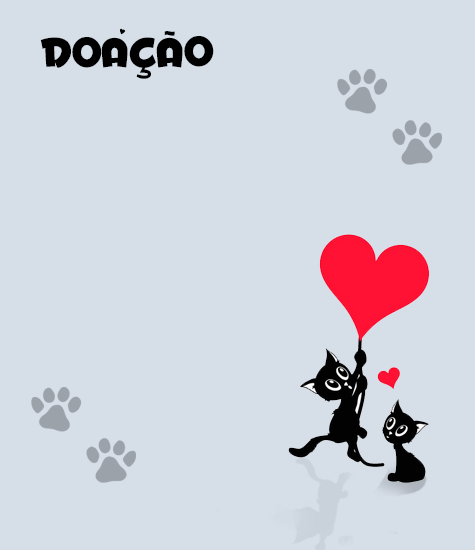
<style>
.page{position:relative;width:475px;height:550px;background:#d6dee8}
.page>*{position:absolute;margin:0}
.t1{font:48px "FontdinerdotcomLuvable";color:#000000}
</style>
<div class="page">
<p class="t1" style="left:40px;top:28px;width:174px;height:51px">DOAÇÃO</p>
</div>
